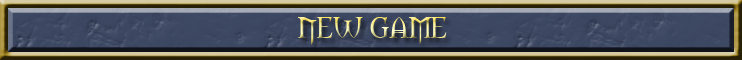
<style>
.page{position:relative;width:742px;height:60px}
.page>*{position:absolute;margin:0}
.t1{font:28px "Morpheus"}
</style>
<div class="page">
<p class="t1" style="left:297px;top:17px;width:150px;height:28px">NEW GAME</p>
</div>
